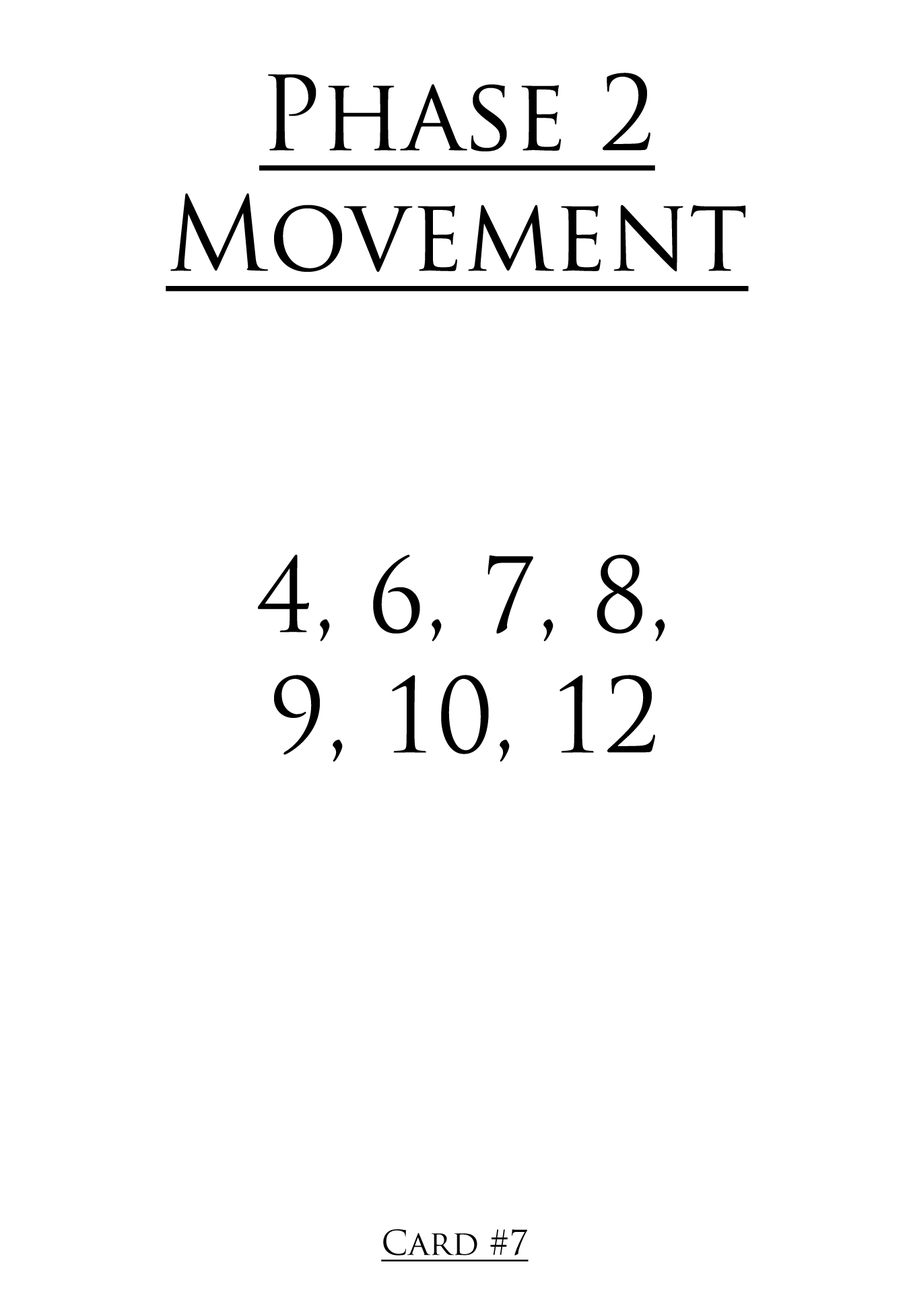
<style>
.page{position:relative;width:909px;height:1312px;background:#ffffff}
.page>*{position:absolute;margin:0}
.t1{font:100.6px "TrajanPro-Regular";color:#000000;text-decoration:underline;scale:0.97 1}
.t2{font:100.6px "TrajanPro-Regular";color:#000000;scale:0.97 1}
.t3{font:33.5px "TrajanPro-Regular";color:#000000;text-decoration:underline}
</style>
<div class="page">
<p class="t1" style="left:166px;top:73px;width:582px;height:218px;text-align:center">Phase 2<br>Movement</p>
<p class="t2" style="left:258px;top:555px;width:407px;height:207px;text-align:center">4, 6, 7, 8,<br>9, 10, 12</p>
<p class="t3" style="left:381px;top:1230px;width:147px;height:32px">Card #7</p>
</div>
